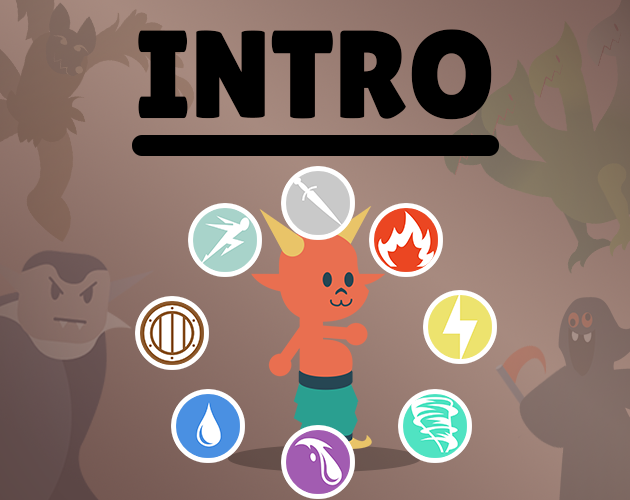
<style>
.page{position:relative;width:630px;height:500px}
.page>*{position:absolute;margin:0}
.t1{font:125px "LilitaOne";color:#000000}
</style>
<div class="page">
<p class="t1" style="left:138px;top:29px;width:354px;height:91px">INTRO</p>
</div>
